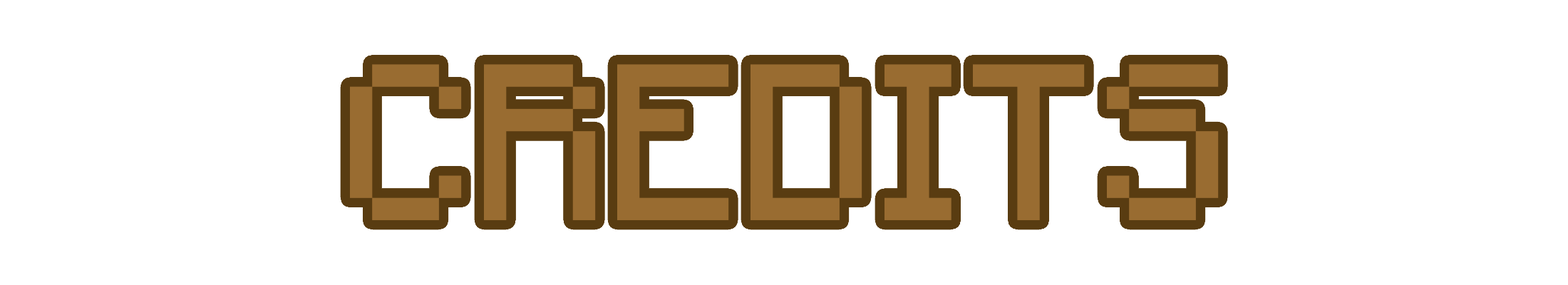
<style>
.page{position:relative;width:1568px;height:285px;background:#ffffff}
.page>*{position:absolute;margin:0}
.t1{font:178px "Minecraft";color:#996c31}
</style>
<div class="page">
<p class="t1" style="left:350px;top:64px;width:869px;height:156px">CREDITS</p>
</div>
